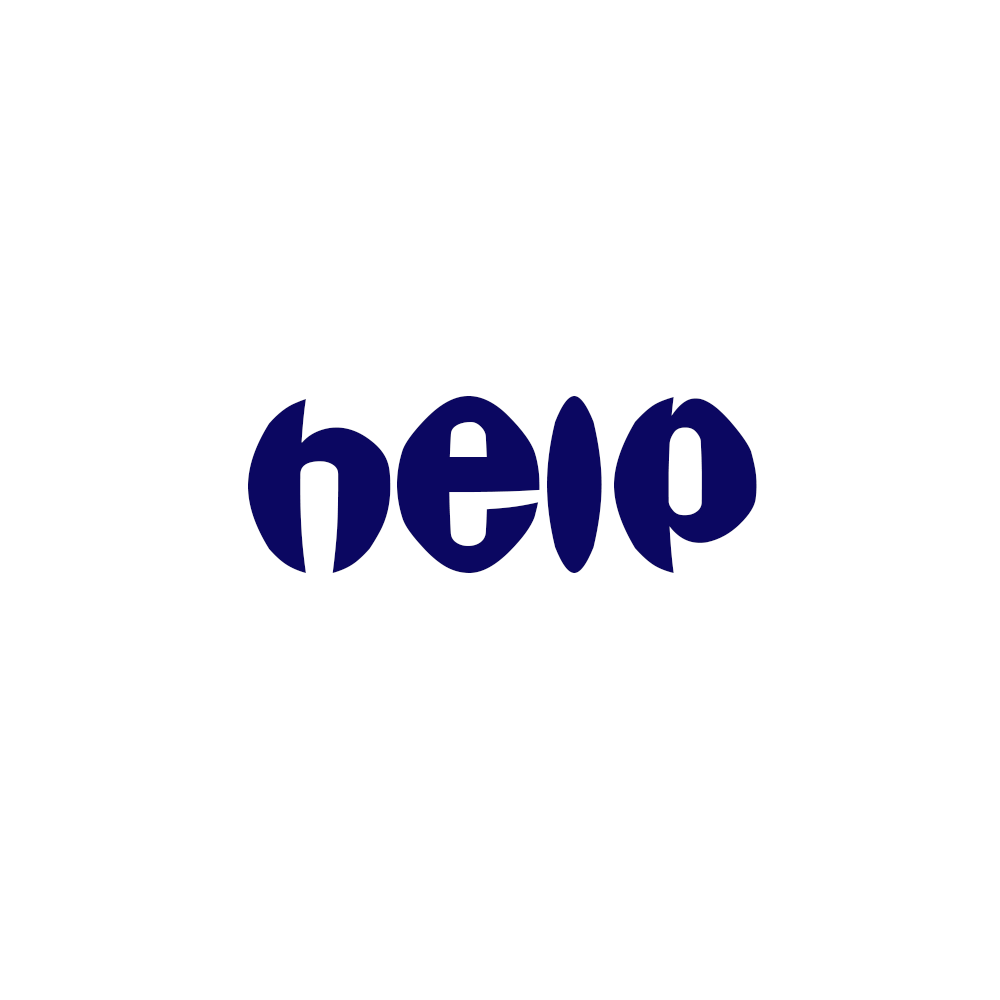
<style>
.page{position:relative;width:1000px;height:1000px;background:#ffffff}
.page>*{position:absolute;margin:0}
.t1{font:186px "Aragones";color:#0b0761}
</style>
<div class="page">
<p class="t1" style="left:248px;top:395px;width:509px;height:178px">help</p>
</div>
